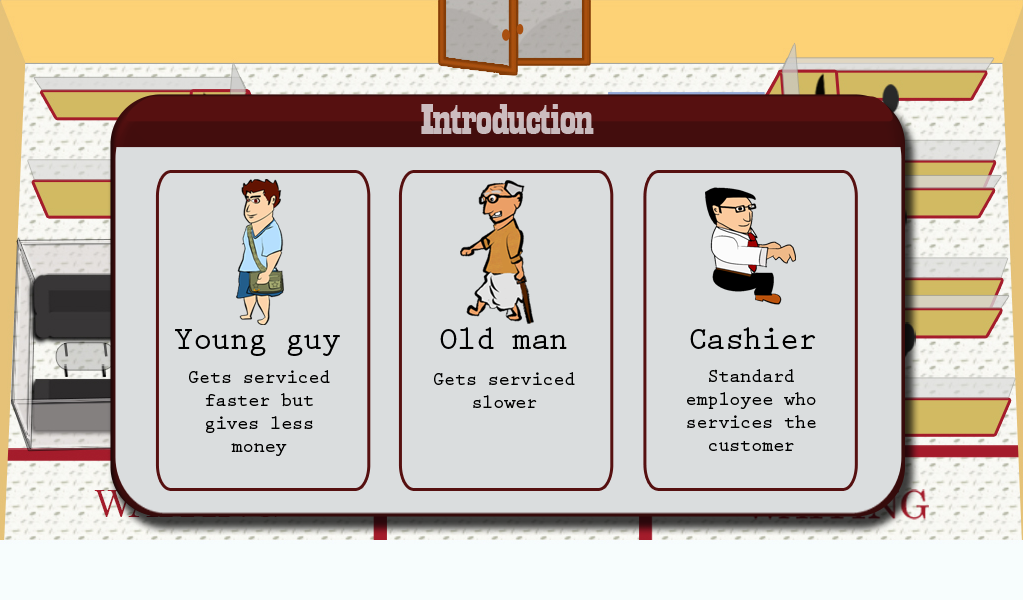
<style>
.page{position:relative;width:1024px;height:600px;background:#daddde}
.page>*{position:absolute;margin:0}
.t1{font:44.6px "Playbill";letter-spacing:-0.025em;color:#c8bbbe;scale:1.61 1}
.t2{font:33.2px "PrestigeEliteStd-Bd";letter-spacing:-0.025em;color:#000000;scale:0.97 1}
.t3{font:19px "PrestigeEliteStd-Bd";letter-spacing:-0.025em;color:#000000}
</style>
<div class="page">
<p class="t1" style="left:421px;top:104px;width:173px;height:30px">Introduction</p>
<p class="t2" style="left:175px;top:329px;width:165px;height:27px">Young guy</p>
<p class="t2" style="left:440px;top:327px;width:127px;height:22px">Old man</p>
<p class="t2" style="left:690px;top:327px;width:126px;height:23px">Cashier</p>
<p class="t3" style="left:189px;top:370px;width:141px;height:86px;text-align:center">Gets serviced faster but gives less money</p>
<p class="t3" style="left:434px;top:372px;width:141px;height:36px;text-align:center">Gets serviced slower</p>
<p class="t3" style="left:687px;top:369px;width:129px;height:82px;text-align:center">Standard employee who services the customer</p>
</div>
